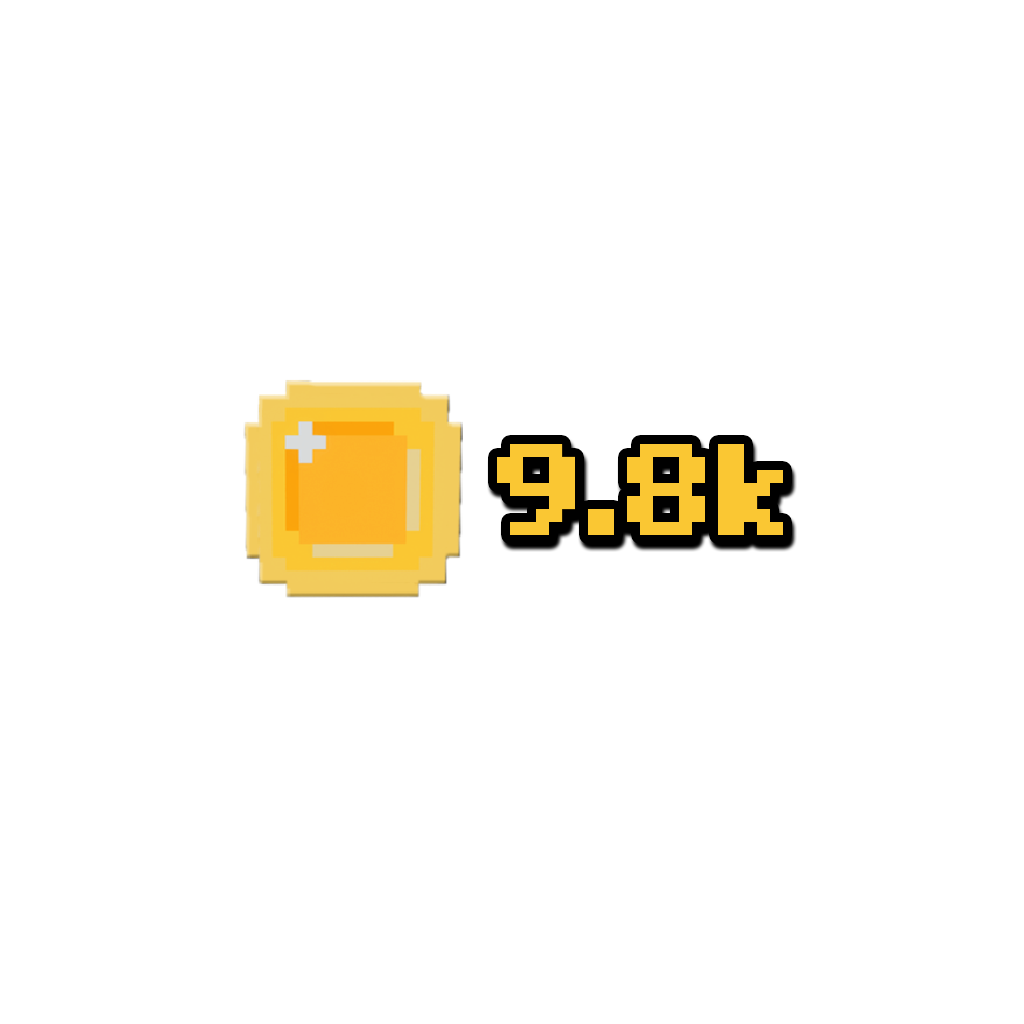
<style>
.page{position:relative;width:1024px;height:1024px;background:#ffffff}
.page>*{position:absolute;margin:0}
.t1{font:130px "Minecraft-Bold";color:#fac733}
</style>
<div class="page">
<p class="t1" style="left:497px;top:444px;width:286px;height:91px">9.8k</p>
</div>
